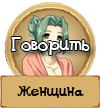
<style>
.page{position:relative;width:100px;height:108px;background:#d8b16d}
.page>*{position:absolute;margin:0}
.t1{font:18px "DSGoose";color:#ffffff}
.t2{font:14px "DSGoose";color:#010101}
</style>
<div class="page">
<p class="t1" style="left:11px;top:37px;width:79px;height:18px">Говорить</p>
<p class="t2" style="left:17px;top:85px;width:67px;height:13px">Женщина</p>
</div>
